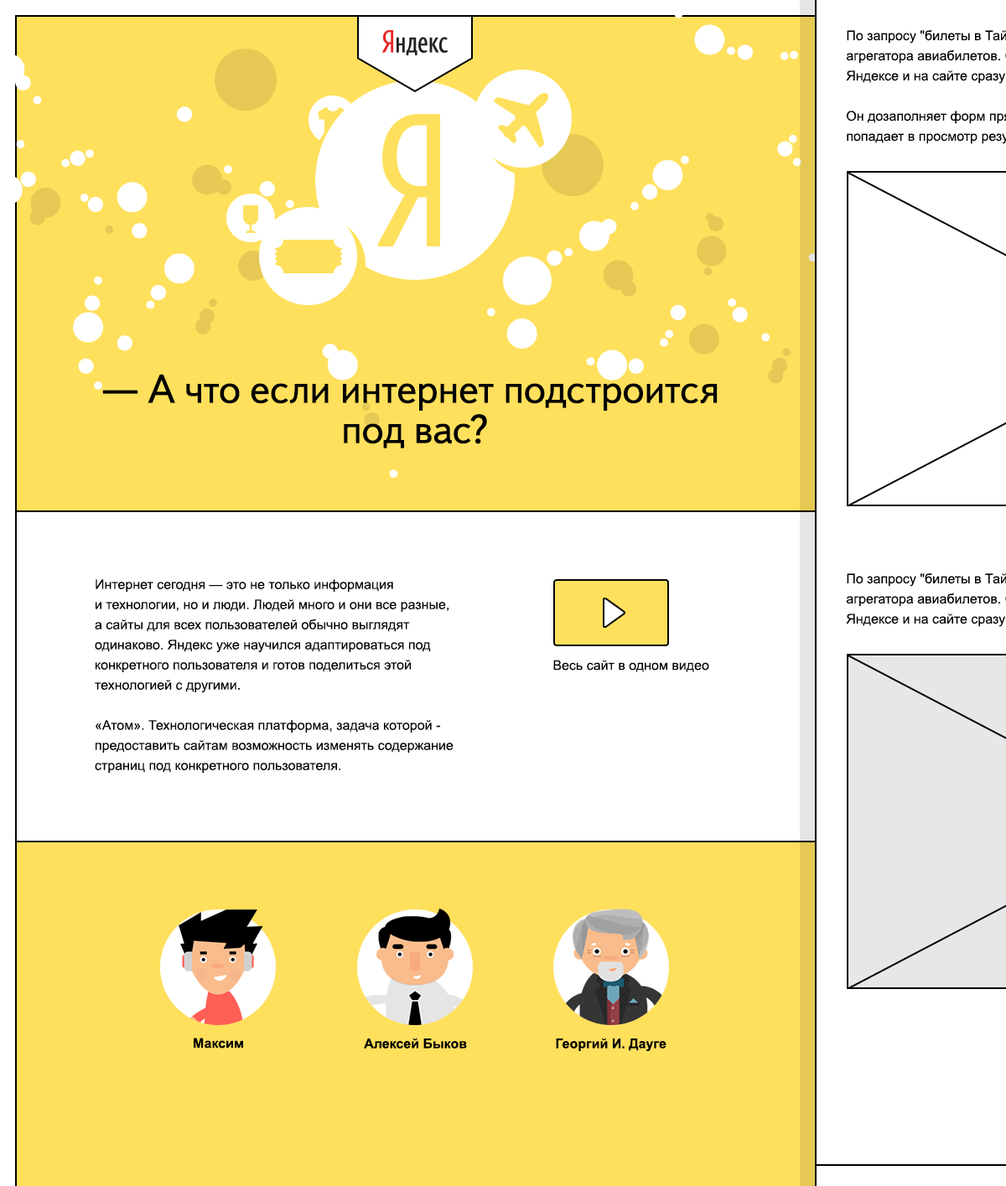
<style>
.page{position:relative;width:1006px;height:1186px;background:#ffe05d}
.page>*{position:absolute;margin:0}
.t1{font:40.2px/40.2px "TextbookNew-Regular";color:#000000}
.t2{font:40.2px "TextbookNew-Regular";color:#000000}
.t3{font:13.4px/20.1px "ArialMT";color:#000000}
.t4{font:13.4px "ArialMT";color:#000000}
.t5{font:13.4px "Arial-BoldMT";color:#000000}
</style>
<div class="page">
<p class="t1" style="left:147px;top:374px;width:570px;height:74px;text-align:center">А что если интернет подстроится под вас?</p>
<p class="t2" style="left:102px;top:390px;width:36px;height:4px">—</p>
<p class="t3" style="left:95px;top:579px;width:358px;height:194px">Интернет сегодня — это не только информация <br>и технологии, но и люди. Людей много и они все разные, <br>а сайты для всех пользователей обычно выглядят <br>одинаково. Яндекс уже научился адаптироваться под <br>конкретного пользователя и готов поделиться этой <br>технологией с другими.<br><br>«Атом». Технологическая платформа, задача которой - <br>предоставить сайтам возможность изменять содержание страниц под конкретного пользователя.</p>
<p class="t4" style="left:553px;top:660px;width:156px;height:12px">Весь сайт в одном видео</p>
<p class="t5" style="left:194px;top:1037px;width:49px;height:11px">Максим</p>
<p class="t5" style="left:364px;top:1037px;width:103px;height:11px">Алексей Быков</p>
<p class="t5" style="left:556px;top:1037px;width:110px;height:14px">Георгий И. Дауге</p>
</div>
